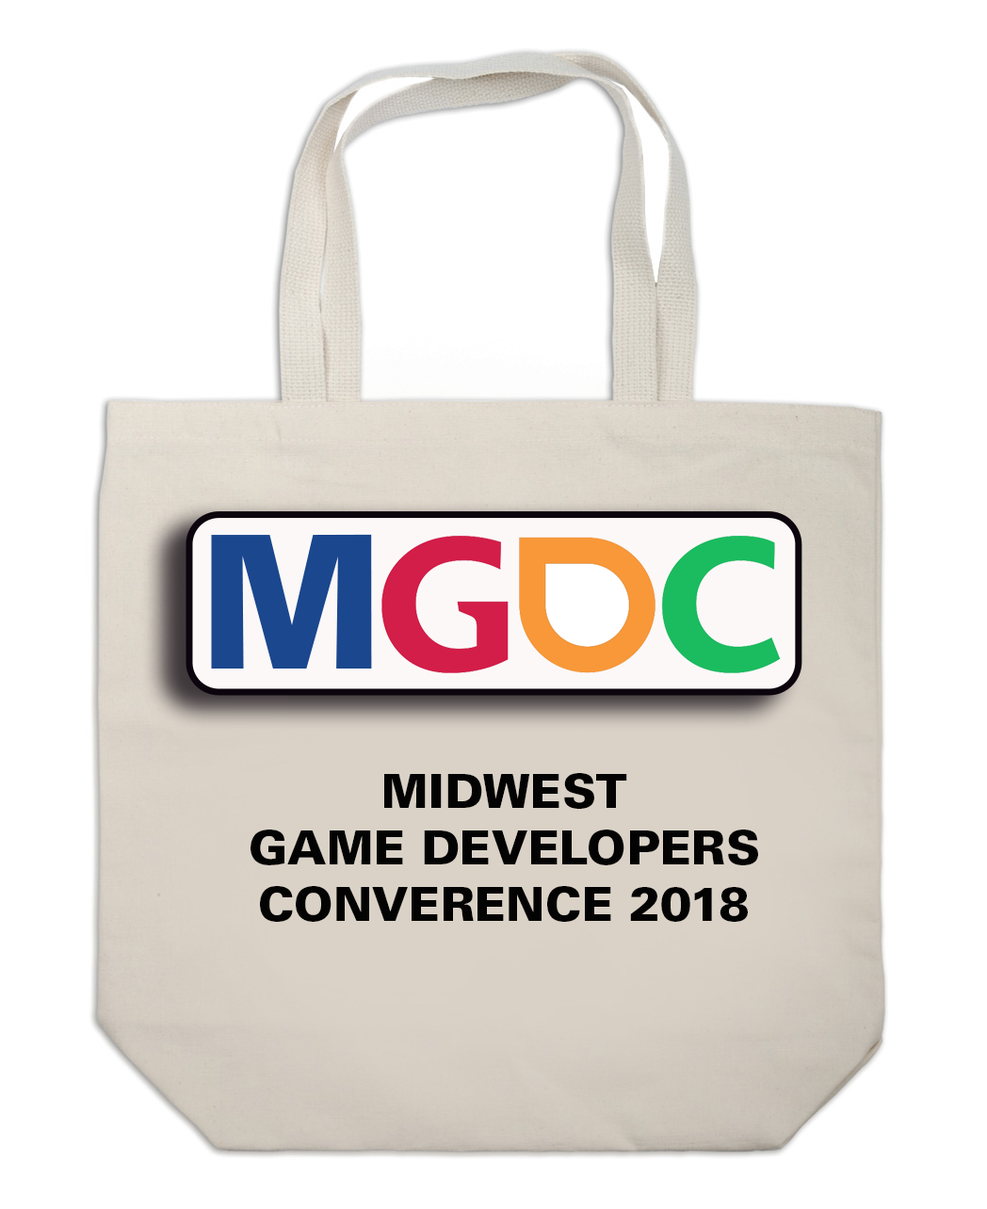
<style>
.page{position:relative;width:987px;height:1209px;background:#ffffff}
.page>*{position:absolute;margin:0}
.t1{font:47.1px "UniversLTStd-Black";color:#030303}
</style>
<div class="page">
<p class="t1" style="left:250px;top:773px;width:508px;height:149px;text-align:center">MIDWEST <br>GAME DEVELOPERS CONVERENCE 2018</p>
</div>
